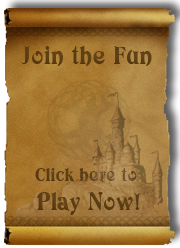
<style>
.page{position:relative;width:180px;height:248px}
.page>*{position:absolute;margin:0}
.t1{font:24px "Avatar";letter-spacing:0.03em;color:#5d3e14}
.t2{font:18px "Avatar";letter-spacing:0.03em;color:#604015}
.t3{font:24px "Avatar";letter-spacing:0.03em;color:#5c3d14}
</style>
<div class="page">
<p class="t1" style="left:21px;top:45px;width:131px;height:21px">Join the Fun</p>
<p class="t2" style="left:35px;top:168px;width:102px;height:14px">Click here to</p>
<p class="t3" style="left:36px;top:192px;width:105px;height:23px">Play Now!</p>
</div>
